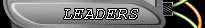
<style>
.page{position:relative;width:205px;height:28px}
.page>*{position:absolute;margin:0}
.t1{font:18px "CourierNewPS-ItalicMT";color:#ffffff}
</style>
<div class="page">
<p class="t1" style="left:64px;top:9px;width:74px;height:10px">LEADERS</p>
</div>
